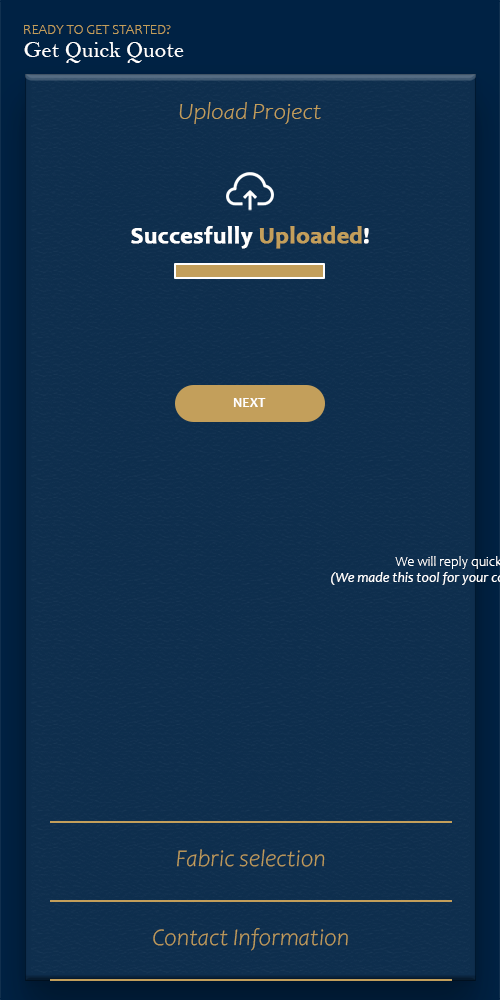
<style>
.page{position:relative;width:500px;height:1000px;background:#0e2e4d}
.page>*{position:absolute;margin:0}
.t1{font:14px "Candara-Light";color:#c39f5b}
.t2{font:23px "BellMT";color:#ffffff}
.t3{font:24px "Candara-LightItalic";color:#c39f5b}
.t4{font:24px "Candara-Bold";color:#ffffff;font-weight:bold}
.t5{font:24px "Candara-Bold";color:#c39f5b;font-weight:bold}
.t6{font:14px "Candara-Bold";color:#ffffff}
</style>
<div class="page">
<p class="t1" style="left:24px;top:25px;width:147px;height:9px">READY TO GET STARTED?</p>
<p class="t2" style="left:24px;top:42px;width:160px;height:21px">Get Quick Quote</p>
<p class="t3" style="left:179px;top:102px;width:142px;height:22px">Upload Project</p>
<p class="t4" style="left:131px;top:226px;width:238px;height:23px">Succesfully<span class="t5"> Uploaded</span>!</p>
<p class="t6" style="left:233px;top:398px;width:33px;height:9px">NEXT</p>
<p class="t3" style="left:177px;top:849px;width:148px;height:18px">Fabric selection</p>
<p class="t3" style="left:153px;top:928px;width:195px;height:23px">Contact Information</p>
</div>
